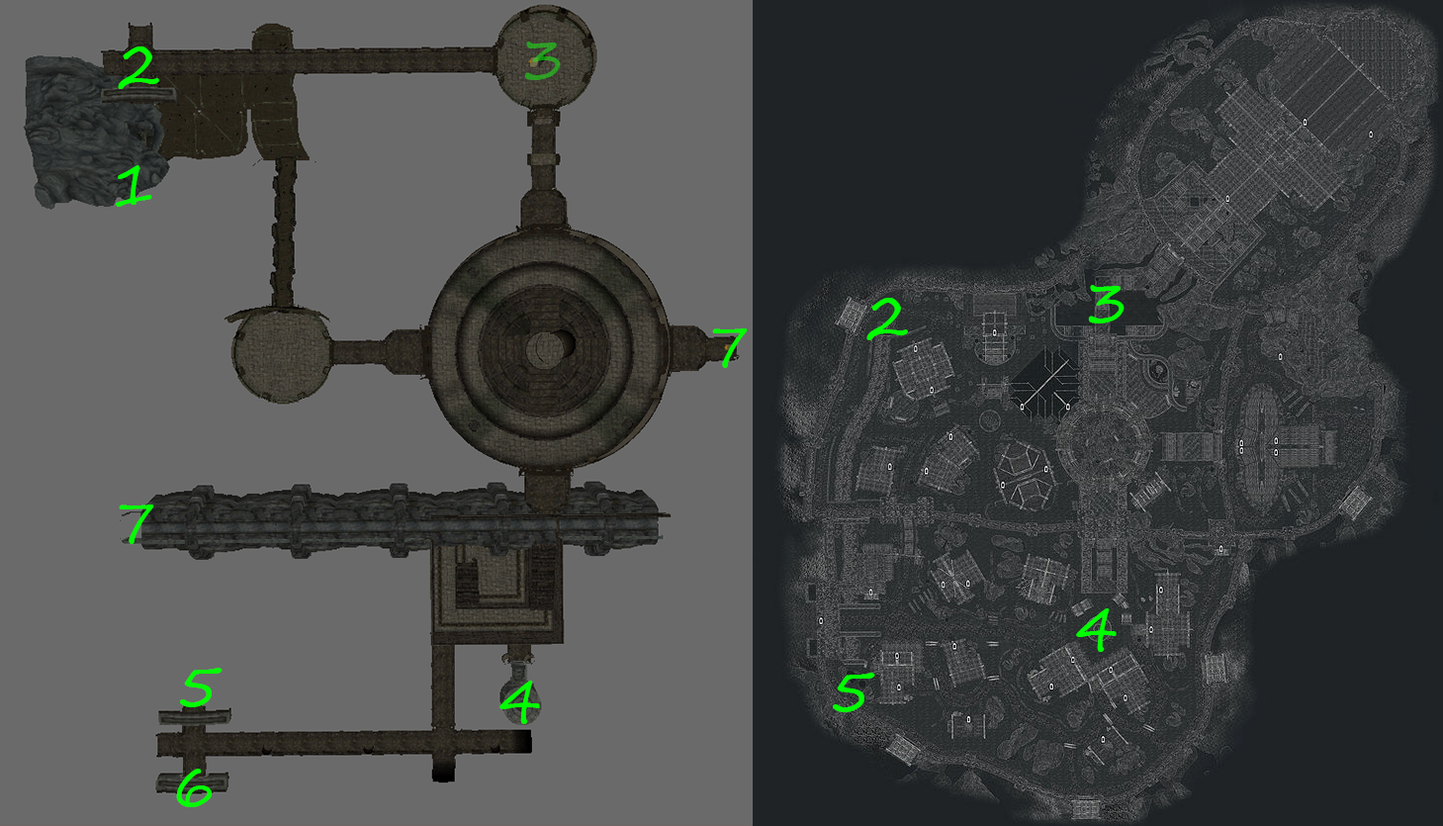
<style>
.page{position:relative;width:1443px;height:826px;background:#6a6a6a}
.page>*{position:absolute;margin:0}
.t1{font:59.4px "SegoeScript";color:#2d9e24}
.t2{font:59.4px "SegoeScript";color:#00ff00}
</style>
<div class="page">
<p class="t1" style="left:524px;top:42px;width:37px;height:38px">3</p>
<p class="t2" style="left:118px;top:46px;width:41px;height:43px">2</p>
<p class="t2" style="left:116px;top:165px;width:36px;height:42px">1</p>
<p class="t2" style="left:1088px;top:285px;width:37px;height:39px">3</p>
<p class="t2" style="left:867px;top:298px;width:41px;height:42px">2</p>
<p class="t2" style="left:712px;top:328px;width:36px;height:40px">7</p>
<p class="t2" style="left:119px;top:505px;width:35px;height:39px">7</p>
<p class="t2" style="left:1076px;top:608px;width:41px;height:44px">4</p>
<p class="t2" style="left:180px;top:668px;width:43px;height:39px">5</p>
<p class="t2" style="left:833px;top:673px;width:43px;height:39px">5</p>
<p class="t2" style="left:500px;top:681px;width:40px;height:43px">4</p>
<p class="t2" style="left:176px;top:769px;width:37px;height:38px">6</p>
</div>
